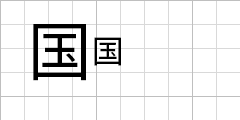
<style>
.page{position:relative;width:240px;height:120px;background:#ffffff}
.page>*{position:absolute;margin:0}
.t1{font:64px "NotoSansCJKjp-Regular";color:#000000}
.t2{font:32px "NotoSansCJKjp-Regular";color:#000000}
</style>
<div class="page">
<p class="t1" style="left:33px;top:24px;width:88px;height:57px">国<span class="t2">国</span></p>
</div>
